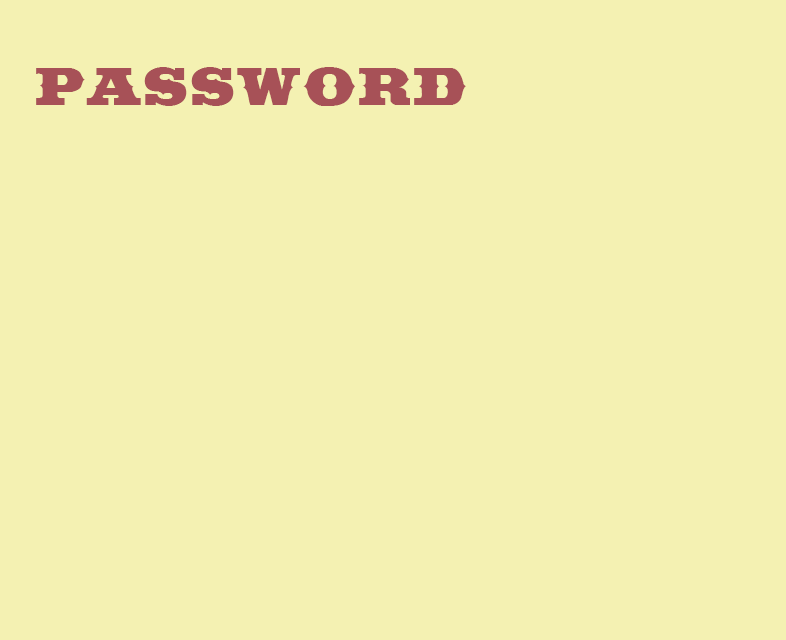
<style>
.page{position:relative;width:786px;height:640px;background:#f4f1b2}
.page>*{position:absolute;margin:0}
.t1{font:70.8px "Saddlebag-Black";color:#a75157}
</style>
<div class="page">
<p class="t1" style="left:36px;top:67px;width:430px;height:39px">PASSWORD</p>
</div>
